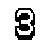
<style>
.page{position:relative;width:48px;height:48px;background:#ffffff}
.page>*{position:absolute;margin:0}
.t1{font:36px "KarmaFuture-Regular";color:#010101}
</style>
<div class="page">
<p class="t1" style="left:15px;top:8px;width:20px;height:32px">3</p>
</div>
